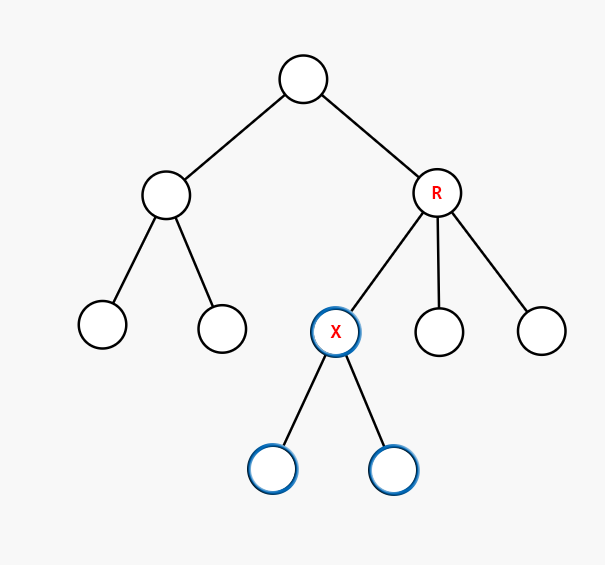
<style>
.page{position:relative;width:605px;height:565px;background:#f8f8f8}
.page>*{position:absolute;margin:0}
.t1{font:20px "Consolas-Bold";color:#ff0000}
</style>
<div class="page">
<p class="t1" style="left:432px;top:186px;width:10px;height:13px">R</p>
<p class="t1" style="left:330px;top:325px;width:12px;height:13px">X</p>
</div>
